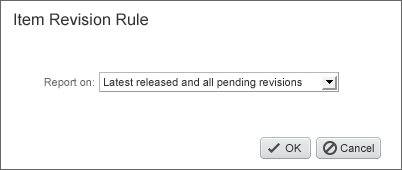
<style>
.page{position:relative;width:402px;height:170px;background:#ffffff}
.page>*{position:absolute;margin:0}
.t1{font:16px "ArialMT";letter-spacing:0.005em;color:#333333}
.t2{font:11px "ArialMT";color:#666666}
.t3{font:11px "ArialMT";color:#303030}
</style>
<div class="page">
<p class="t1" style="left:14px;top:13px;width:134px;height:13px">Item Revision Rule</p>
<p class="t2" style="left:44px;top:78px;width:50px;height:11px">Report on:</p>
<p class="t3" style="left:104px;top:78px;width:198px;height:11px">Latest released and all pending revisions</p>
<p class="t3" style="left:285px;top:144px;width:17px;height:8px">OK</p>
<p class="t3" style="left:340px;top:144px;width:34px;height:8px">Cancel</p>
</div>
